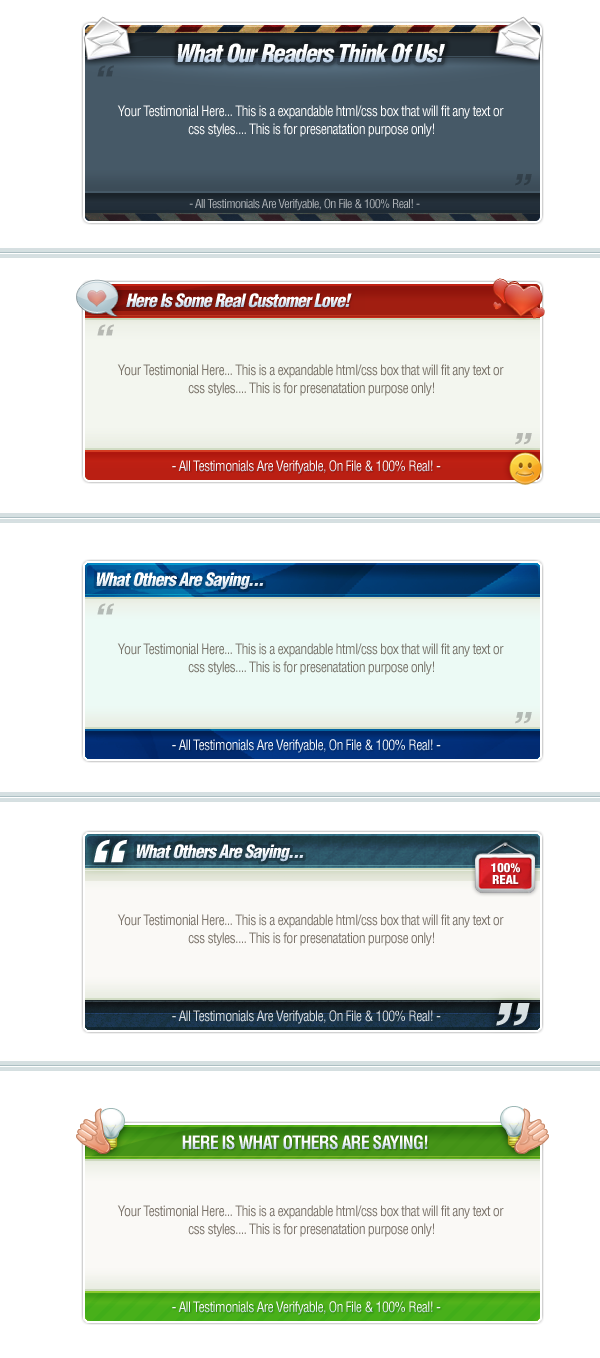
<style>
.page{position:relative;width:600px;height:1358px;background:#ffffff}
.page>*{position:absolute;margin:0}
.t1{font:24px "Helvetica-Condensed-BlackObl";letter-spacing:-0.05em}
.t2{font:14px/18px "Helvetica-Condensed";letter-spacing:-0.05em;color:#ffffff}
.t3{font:12px "Helvetica-Condensed";letter-spacing:-0.05em;color:#aeb2b6}
.t4{font:18px "Helvetica-Condensed-BlackObl";letter-spacing:-0.05em}
.t5{font:14px/18px "Helvetica-Condensed";letter-spacing:-0.05em;color:#797268}
.t6{font:14px "Helvetica-Condensed";letter-spacing:-0.05em;color:#ffffff}
.t7{font:18px "Helvetica-Condensed-BlackObl";letter-spacing:-0.05em;color:#ffffff}
.t8{font:14px/18px "Helvetica-Condensed";letter-spacing:-0.05em;color:#77736a}
.t9{font:21.5px/12px "HelveticaNeue-CondensedBlack";color:#ffffff}
.t10{font:14px/18px "Helvetica-Condensed";letter-spacing:-0.05em;color:#7b736a}
.t11{font:14px "Helvetica-Condensed";letter-spacing:-0.05em;color:#dadee2}
.t12{font:18px "Helvetica-Condensed-Bold";letter-spacing:-0.05em;color:#ffffff;text-transform:uppercase}
</style>
<div class="page">
<p class="t1" style="left:177px;top:43px;width:268px;height:20px">What Our Readers Think Of Us!</p>
<p class="t2" style="left:117px;top:105px;width:387px;height:32px;text-align:center">Your Testimonial Here... This is a expandable html/css box that will fit any text or <br>css styles.... This is for presenatation purpose only!</p>
<p class="t3" style="left:189px;top:198px;width:231px;height:13px">- All Testimonials Are Verifyable, On File &amp; 100% Real! -</p>
<p class="t4" style="left:126px;top:293px;width:226px;height:15px">Here Is Some Real Customer Love!</p>
<p class="t5" style="left:117px;top:364px;width:387px;height:32px;text-align:center">Your Testimonial Here... This is a expandable html/css box that will fit any text or <br>css styles.... This is for presenatation purpose only!</p>
<p class="t6" style="left:172px;top:460px;width:269px;height:14px">- All Testimonials Are Verifyable, On File &amp; 100% Real! -</p>
<p class="t7" style="left:96px;top:572px;width:168px;height:18px">What Others Are Saying...</p>
<p class="t8" style="left:117px;top:643px;width:387px;height:32px;text-align:center">Your Testimonial Here... This is a expandable html/css box that will fit any text or <br>css styles.... This is for presenatation purpose only!</p>
<p class="t6" style="left:172px;top:739px;width:269px;height:14px">- All Testimonials Are Verifyable, On File &amp; 100% Real! -</p>
<p class="t7" style="left:136px;top:844px;width:168px;height:18px">What Others Are Saying...</p>
<p class="t9" style="left:491px;top:863px;width:29px;height:21px;text-align:center">100%<br>REAL</p>
<p class="t10" style="left:117px;top:914px;width:387px;height:32px;text-align:center">Your Testimonial Here... This is a expandable html/css box that will fit any text or <br>css styles.... This is for presenatation purpose only!</p>
<p class="t11" style="left:172px;top:1010px;width:269px;height:14px">- All Testimonials Are Verifyable, On File &amp; 100% Real! -</p>
<p class="t12" style="left:182px;top:1135px;width:246px;height:15px">Here Is What Others Are Saying!</p>
<p class="t10" style="left:117px;top:1205px;width:387px;height:32px;text-align:center">Your Testimonial Here... This is a expandable html/css box that will fit any text or <br>css styles.... This is for presenatation purpose only!</p>
<p class="t6" style="left:172px;top:1301px;width:269px;height:14px">- All Testimonials Are Verifyable, On File &amp; 100% Real! -</p>
</div>
